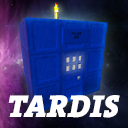
<style>
.page{position:relative;width:128px;height:128px}
.page>*{position:absolute;margin:0}
.t1{font:32px "TheSerifBlack-Italic";color:#ffffff}
</style>
<div class="page">
<p class="t1" style="left:8px;top:95px;width:112px;height:23px">TARDIS</p>
</div>
